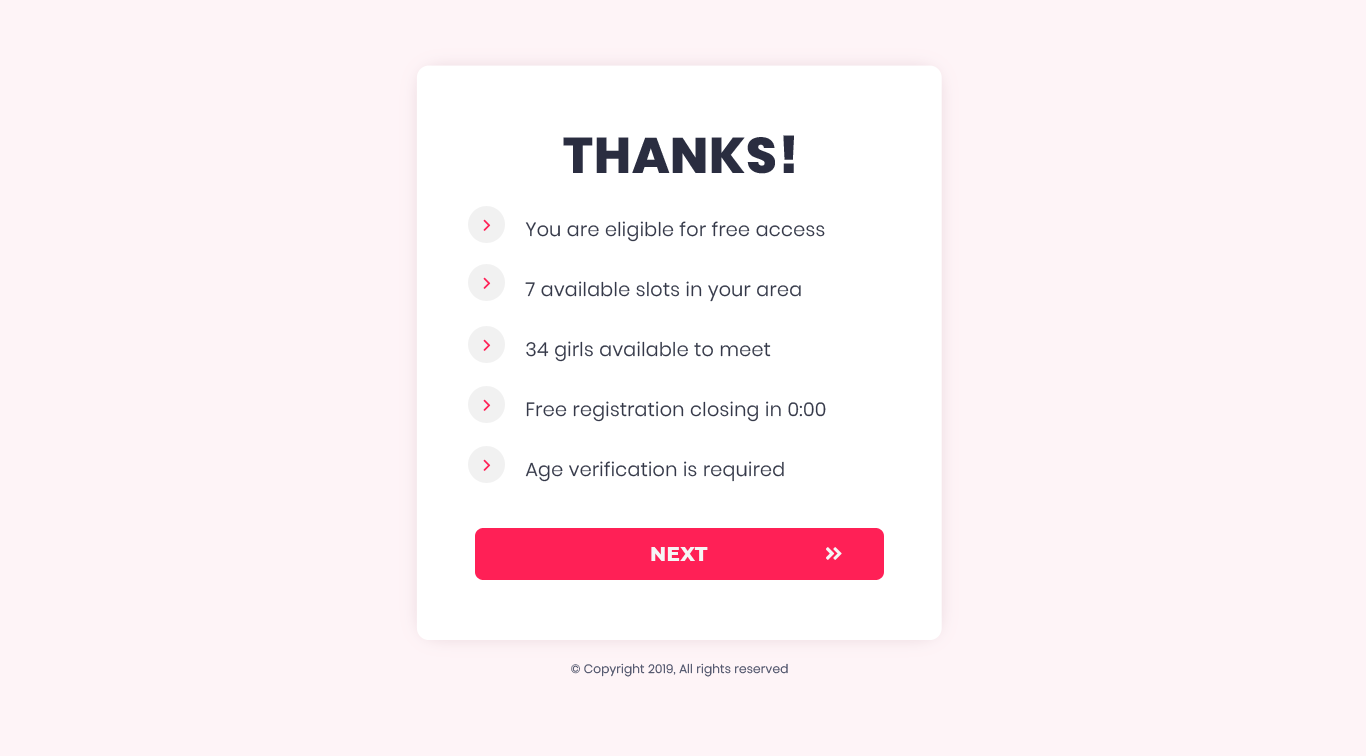
<style>
.page{position:relative;width:1366px;height:756px;background:#fef4f7}
.page>*{position:absolute;margin:0}
.t1{font:50px "Poppins-ExtraBold";letter-spacing:0.02em;color:#2a2d40}
.t2{font:19px/60px "Poppins-Light";letter-spacing:0.02em;color:#343848}
.t3{font:20px "Montserrat-ExtraBold";letter-spacing:0.02em;color:#f5f5f5}
.t4{font:12px "Poppins-Light";letter-spacing:0.02em;color:#4c5168}
</style>
<div class="page">
<p class="t1" style="left:563px;top:135px;width:231px;height:39px">THANKS!</p>
<p class="t2" style="left:525px;top:221px;width:301px;height:261px">You are eligible for free access<br>7 available slots in your area<br>34 girls available to meet<br>Free registration closing in 0:00<br>Age verification is required</p>
<p class="t3" style="left:651px;top:547px;width:57px;height:14px">NEXT</p>
<p class="t4" style="left:571px;top:663px;width:217px;height:14px">© Copyright 2019, All rights reserved</p>
</div>
